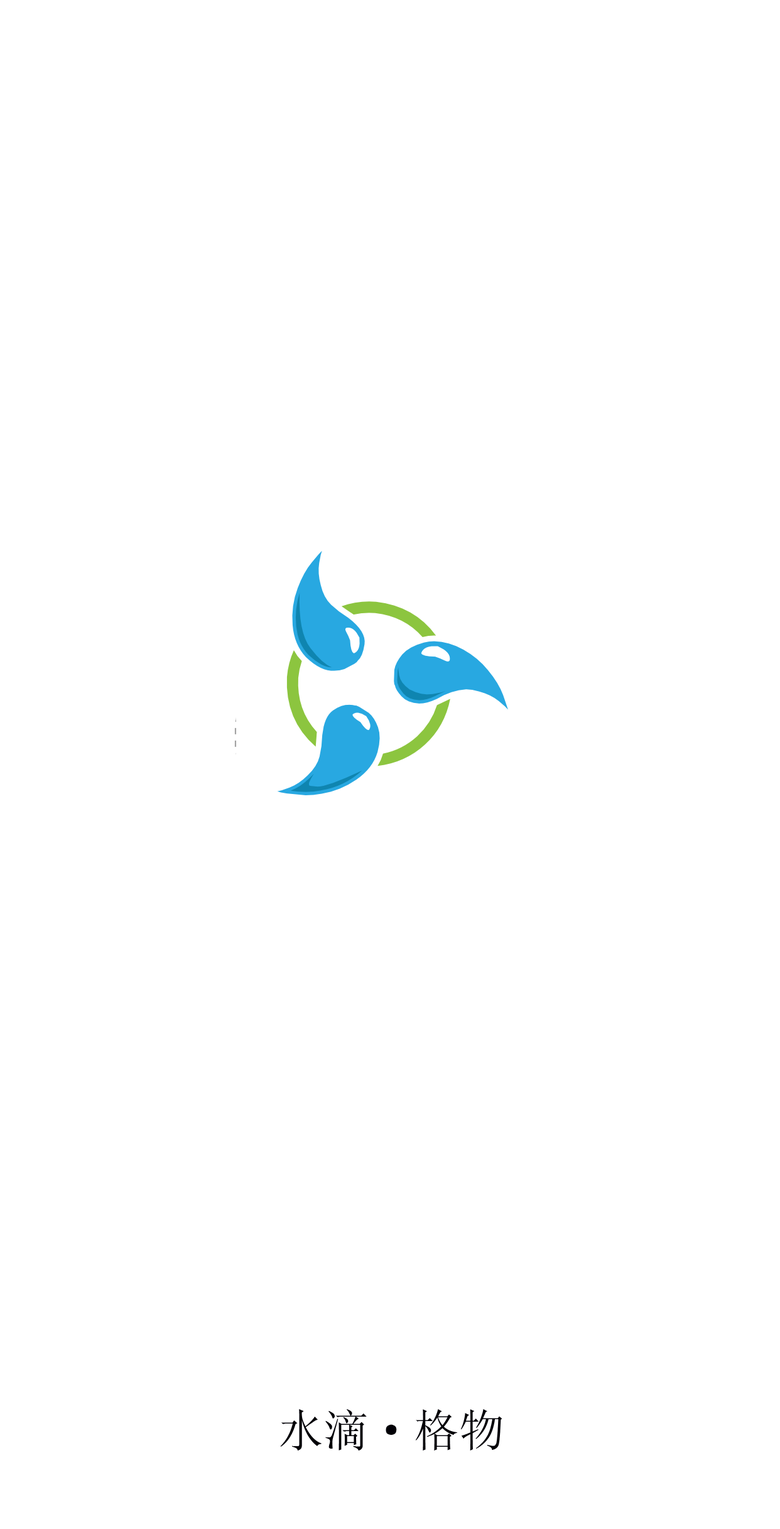
<style>
.page{position:relative;width:780px;height:1529px;background:#ffffff}
.page>*{position:absolute;margin:0}
.t1{font:45.2px "SimSun";color:#010006}
</style>
<div class="page">
<p class="t1" style="left:280px;top:1409px;width:222px;height:42px">水滴·格物</p>
</div>
